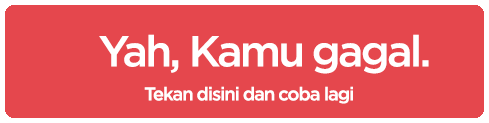
<style>
.page{position:relative;width:489px;height:123px;background:#e5474d}
.page>*{position:absolute;margin:0}
.t1{font:43.1px "iCielGotham-Medium";letter-spacing:-0.06em;color:#ffffff}
.t2{font:18.5px "iCielGotham-Medium";letter-spacing:-0.06em;color:#ffffff}
</style>
<div class="page">
<p class="t1" style="left:99px;top:34px;width:330px;height:40px">Yah, Kamu gagal.</p>
<p class="t2" style="left:144px;top:86px;width:209px;height:18px">Tekan disini dan coba lagi</p>
</div>
